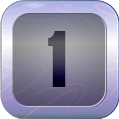
<style>
.page{position:relative;width:119px;height:119px}
.page>*{position:absolute;margin:0}
.t1{font:79.5px "Haettenschweiler"}
</style>
<div class="page">
<p class="t1" style="left:48px;top:31px;width:18px;height:56px">1</p>
</div>
